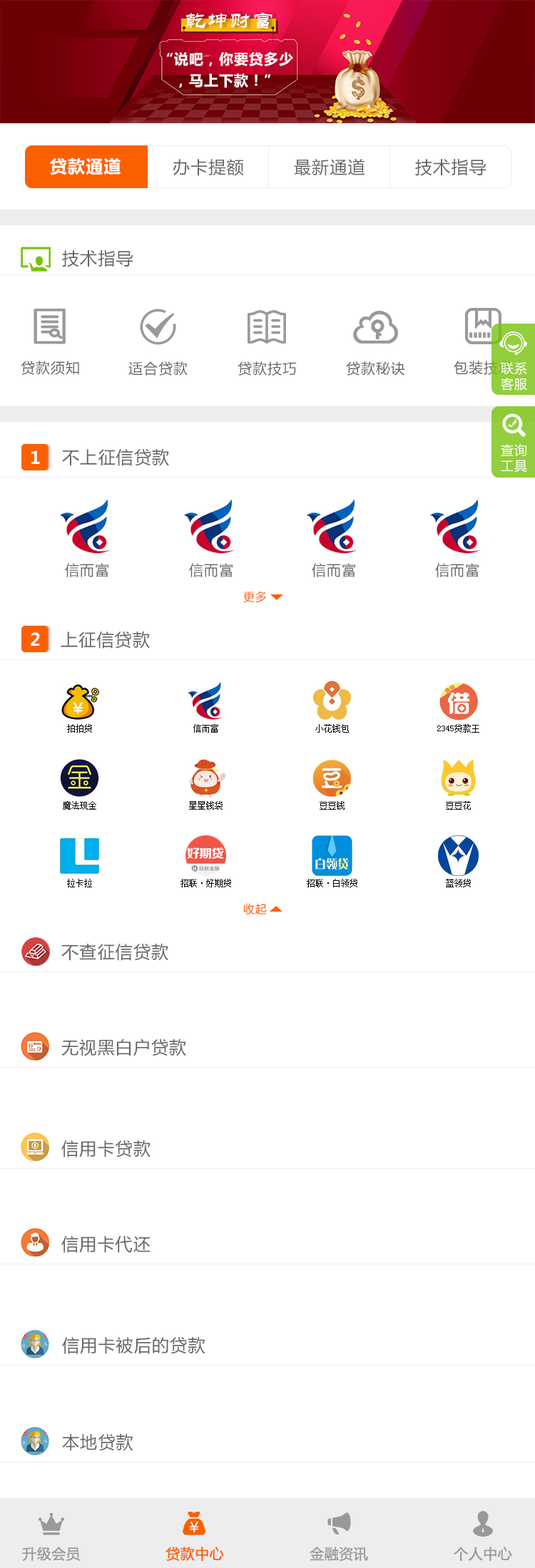
<style>
.page{position:relative;width:535px;height:1568px;background:#ffffff}
.page>*{position:absolute;margin:0}
.t1{font:21.4px "STLiti";letter-spacing:0.05em;color:#ffffff}
.t2{font:14.3px/21.4px "MicrosoftYaHei-Bold";letter-spacing:0.05em;color:#ffffff}
.t3{font:17.1px "MicrosoftYaHei-Bold";letter-spacing:0.05em;color:#ffffff}
.t4{font:17.1px "MicrosoftYaHei";letter-spacing:0.05em;color:#666666}
.t5{font:14.3px "MicrosoftYaHei";letter-spacing:0.05em;color:#666666}
.t6{font:12.8px "MicrosoftYaHei";letter-spacing:0.05em;color:#ffffff}
.t7{font:11.4px "MicrosoftYaHei";letter-spacing:0.05em;color:#fb6000}
.t8{font:14.3px "MicrosoftYaHei";color:#999999;font-weight:bold}
.t9{font:14.3px "MicrosoftYaHei";color:#fb6000;font-weight:bold}
</style>
<div class="page">
<p class="t1" style="left:186px;top:12px;width:86px;height:17px">乾坤财富</p>
<p class="t2" style="left:166px;top:52px;width:127px;height:36px;text-align:center">“说吧，你要贷多少<br>，马上下款！”</p>
<p class="t3" style="left:50px;top:158px;width:70px;height:17px">贷款通道</p>
<p class="t4" style="left:172px;top:159px;width:72px;height:17px">办卡提额</p>
<p class="t4" style="left:294px;top:158px;width:71px;height:18px">最新通道</p>
<p class="t4" style="left:415px;top:159px;width:71px;height:17px">技术指导</p>
<p class="t4" style="left:62px;top:250px;width:71px;height:17px">技术指导</p>
<p class="t5" style="left:21px;top:361px;width:58px;height:14px">贷款须知</p>
<p class="t5" style="left:128px;top:361px;width:59px;height:15px">适合贷款</p>
<p class="t5" style="left:237px;top:361px;width:59px;height:15px">贷款技巧</p>
<p class="t5" style="left:346px;top:361px;width:59px;height:15px">贷款秘诀</p>
<p class="t5" style="left:453px;top:361px;width:59px;height:14px">包装技术</p>
<p class="t6" style="left:500px;top:362px;width:27px;height:29px">联系<br>客服</p>
<p class="t4" style="left:62px;top:448px;width:107px;height:18px">不上征信贷款</p>
<p class="t6" style="left:500px;top:444px;width:27px;height:29px">查询<br>工具</p>
<p class="t3" style="left:31px;top:450px;width:9px;height:14px">1</p>
<p class="t5" style="left:65px;top:563px;width:43px;height:14px">信而富</p>
<p class="t5" style="left:189px;top:563px;width:43px;height:14px">信而富</p>
<p class="t5" style="left:311px;top:563px;width:44px;height:14px">信而富</p>
<p class="t5" style="left:435px;top:563px;width:43px;height:14px">信而富</p>
<p class="t7" style="left:243px;top:591px;width:23px;height:12px">更多</p>
<p class="t3" style="left:31px;top:632px;width:9px;height:14px">2</p>
<p class="t4" style="left:61px;top:631px;width:89px;height:18px">上征信贷款</p>
<p class="t7" style="left:243px;top:903px;width:24px;height:12px">收起</p>
<p class="t4" style="left:61px;top:943px;width:107px;height:18px">不查征信贷款</p>
<p class="t4" style="left:61px;top:1038px;width:125px;height:18px">无视黑白户贷款</p>
<p class="t4" style="left:61px;top:1140px;width:89px;height:17px">信用卡贷款</p>
<p class="t4" style="left:61px;top:1236px;width:89px;height:17px">信用卡代还</p>
<p class="t4" style="left:62px;top:1336px;width:143px;height:18px">信用卡被后的贷款</p>
<p class="t4" style="left:62px;top:1433px;width:71px;height:18px">本地贷款</p>
<p class="t8" style="left:22px;top:1547px;width:59px;height:14px">升级会员</p>
<p class="t9" style="left:165px;top:1547px;width:59px;height:14px">贷款中心</p>
<p class="t8" style="left:309px;top:1547px;width:59px;height:14px">金融资讯</p>
<p class="t8" style="left:453px;top:1547px;width:59px;height:14px">个人中心</p>
</div>
